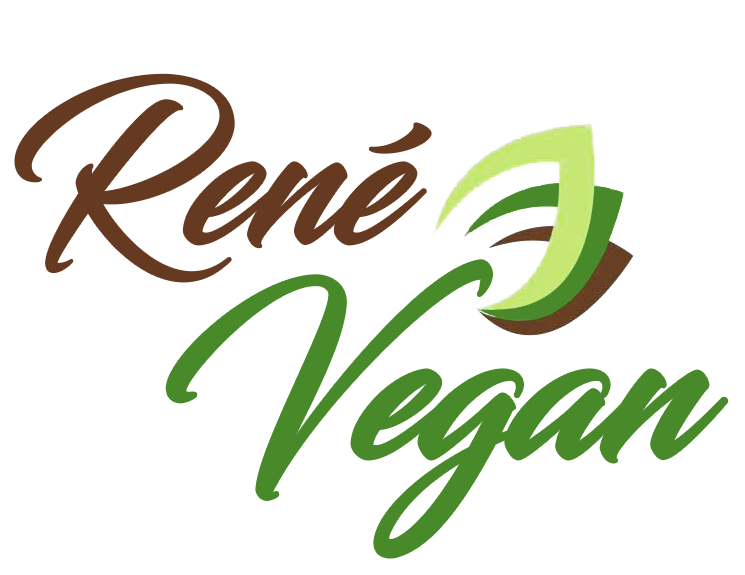
<style>
.page{position:relative;width:745px;height:575px;background:#ffffff}
.page>*{position:absolute;margin:0}
.t1{font:199px "Blacksword";color:#663a21;scale:0.93 1}
.t2{font:214px "Blacksword";color:#488a29;scale:0.93 1}
</style>
<div class="page">
<p class="t1" style="left:16px;top:75px;width:414px;height:206px">René</p>
<p class="t2" style="left:168px;top:262px;width:558px;height:294px">Vegan</p>
</div>
